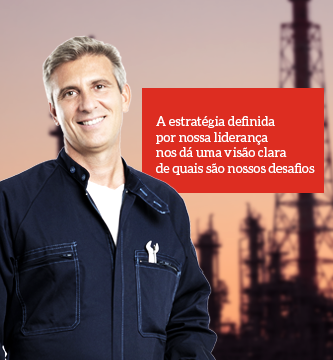
<style>
.page{position:relative;width:333px;height:360px}
.page>*{position:absolute;margin:0}
.t1{font:13px "Aleo-Regular";color:#ffffff}
</style>
<div class="page">
<p class="t1" style="left:156px;top:116px;width:159px;height:59px">A estratégia definida<br>por nossa liderança<br>nos dá uma visão clara<br>de quais são nossos desafios</p>
</div>
